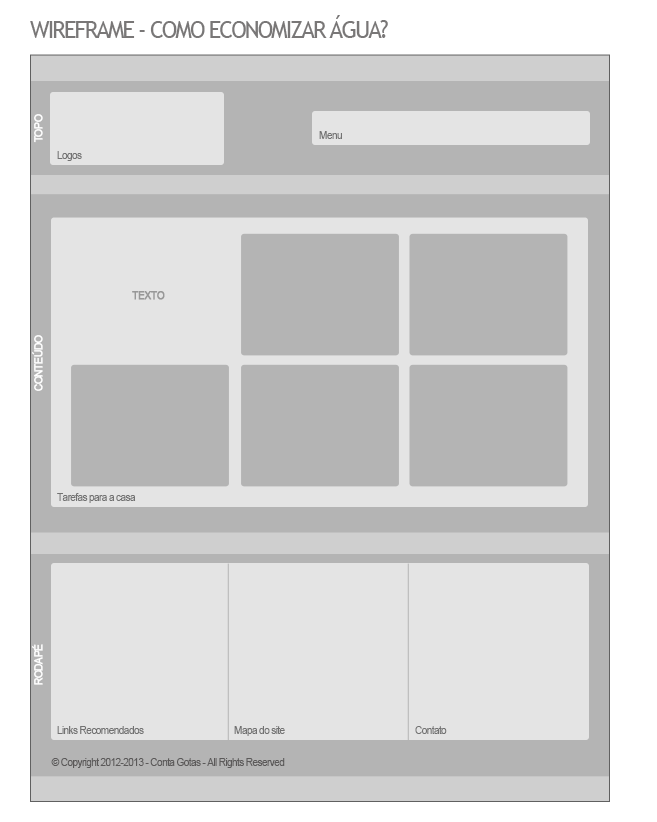
<style>
.page{position:relative;width:657px;height:822px;background:#b4b4b4}
.page>*{position:absolute;margin:0}
.t1{font:24px "TrebuchetMS";letter-spacing:-0.075em;color:#797777;scale:0.95 1}
.t2{font:11px "ArialMT";letter-spacing:-0.075em;color:#ffffff;font-weight:bold;scale:0.95 1}
.t3{font:11px "ArialMT";letter-spacing:-0.075em;color:#727272;scale:0.95 1}
.t4{font:11px "ArialMT";letter-spacing:-0.075em;color:#989898;font-weight:bold;scale:0.95 1}
.t5{font:11px "ArialMT";letter-spacing:-0.075em;color:#5b5959;scale:0.95 1}
</style>
<div class="page">
<p class="t1" style="left:30px;top:15px;width:358px;height:23px">WIREFRAME - COMO ECONOMIZAR ÁGUA?</p>
<p class="t2" style="left:34px;top:114px;width:9px;height:29px;rotate:-90deg">TOPO</p>
<p class="t3" style="left:319px;top:131px;width:23px;height:8px">Menu</p>
<p class="t3" style="left:57px;top:151px;width:25px;height:10px">Logos</p>
<p class="t4" style="left:132px;top:291px;width:33px;height:9px">TEXTO</p>
<p class="t2" style="left:32px;top:335px;width:11px;height:56px;rotate:-90deg">CONTEÚDO</p>
<p class="t3" style="left:57px;top:493px;width:79px;height:10px">Tarefas para a casa</p>
<p class="t2" style="left:32px;top:644px;width:11px;height:41px;rotate:-90deg">RODAPÉ</p>
<p class="t3" style="left:57px;top:726px;width:87px;height:8px">Links Recomendados</p>
<p class="t3" style="left:234px;top:726px;width:51px;height:10px">Mapa do site</p>
<p class="t3" style="left:415px;top:726px;width:32px;height:8px">Contato</p>
<p class="t5" style="left:51px;top:758px;width:234px;height:10px">© Copyright 2012-2013 - Conta Gotas - All Rights Reserved</p>
</div>
